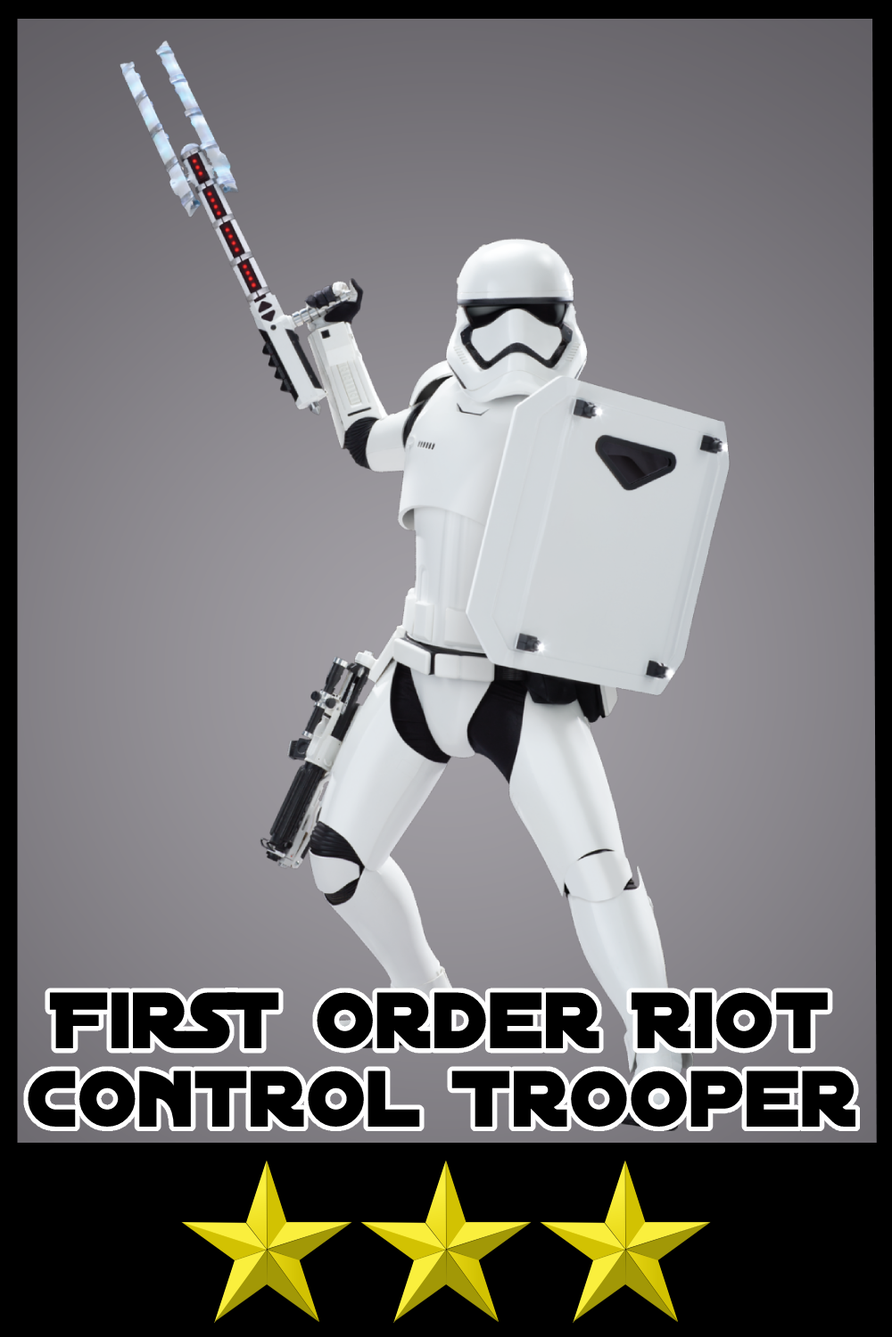
<style>
.page{position:relative;width:892px;height:1337px}
.page>*{position:absolute;margin:0}
.t1{font:85.6px/78.1px "DistantGalaxy";color:#000000}
</style>
<div class="page">
<p class="t1" style="left:28px;top:992px;width:827px;height:135px;text-align:center">First Order Riot<br>Control Trooper</p>
</div>
